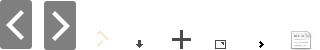
<style>
.page{position:relative;width:320px;height:50px;background:#ffffff}
.page>*{position:absolute;margin:0}
.t1{font:36px "Perpetua-Bold";color:#4b4b4b;font-weight:bold}
</style>
<div class="page">
<p class="t1" style="left:172px;top:30px;width:19px;height:19px">+</p>
</div>
